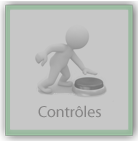
<style>
.page{position:relative;width:138px;height:141px;background:#c7c7c7}
.page>*{position:absolute;margin:0}
.t1{font:15.9px "MyriadPro-Regular";color:#868585}
</style>
<div class="page">
<p class="t1" style="left:38px;top:105px;width:63px;height:13px">Contrôles</p>
</div>
